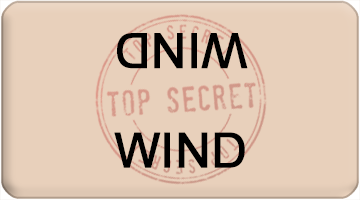
<style>
.page{position:relative;width:360px;height:200px;background:#e8d0bb}
.page>*{position:absolute;margin:0}
.t1{font:48px "ArialMT";color:#000000;font-weight:bold}
</style>
<div class="page">
<p class="t1" style="left:117px;top:33px;width:131px;height:36px;rotate:180deg">WIND</p>
<p class="t1" style="left:114px;top:132px;width:131px;height:36px">WIND</p>
</div>
